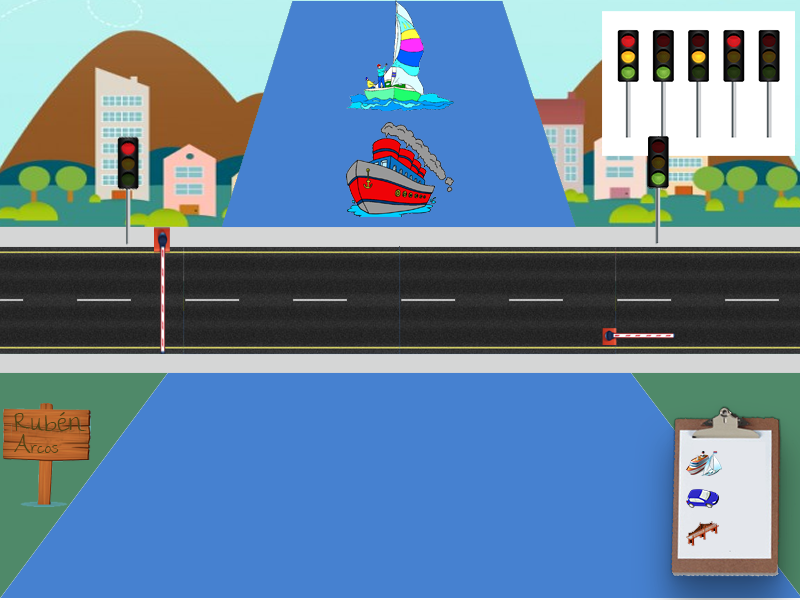
<style>
.page{position:relative;width:800px;height:600px;background:#4681d0}
.page>*{position:absolute;margin:0}
.t1{font:18px "thegirlnextdoor";color:#4f4315}
.t2{font:10px "thegirlnextdoor";color:#4f4315}
</style>
<div class="page">
<p class="t1" style="left:14px;top:412px;width:73px;height:41px">Rubén<br>A<span class="t2">rcos</span></p>
</div>
